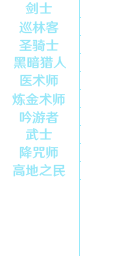
<style>
.page{position:relative;width:128px;height:256px;background:#ffffff}
.page>*{position:absolute;margin:0}
.t1{font:13.3px "HYWenHei-FEW";color:#95e7f8}
</style>
<div class="page">
<p class="t1" style="left:25px;top:2px;width:27px;height:13px">剑士</p>
<p class="t1" style="left:19px;top:20px;width:40px;height:14px">巡林客</p>
<p class="t1" style="left:19px;top:39px;width:40px;height:13px">圣骑士</p>
<p class="t1" style="left:13px;top:56px;width:53px;height:13px">黑暗猎人</p>
<p class="t1" style="left:20px;top:74px;width:39px;height:13px">医术师</p>
<p class="t1" style="left:12px;top:93px;width:53px;height:13px">炼金术师</p>
<p class="t1" style="left:19px;top:111px;width:40px;height:13px">吟游者</p>
<p class="t1" style="left:26px;top:128px;width:26px;height:13px">武士</p>
<p class="t1" style="left:19px;top:146px;width:40px;height:13px">降咒师</p>
<p class="t1" style="left:12px;top:164px;width:54px;height:13px">高地之民</p>
</div>
